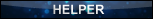
<style>
.page{position:relative;width:153px;height:19px}
.page>*{position:absolute;margin:0}
.t1{font:12.7px "Arial-BoldMT";color:#ffffff}
</style>
<div class="page">
<p class="t1" style="left:53px;top:4px;width:52px;height:10px">HELPER</p>
</div>
